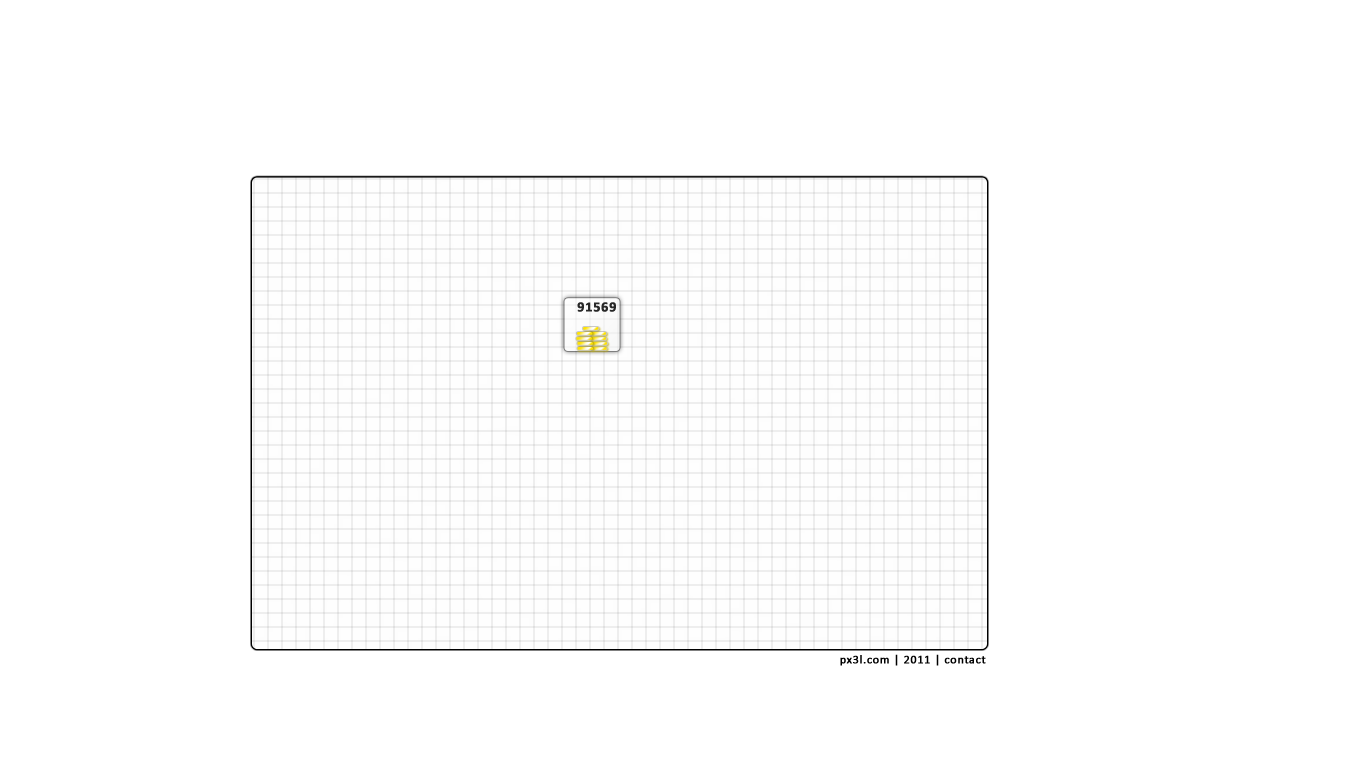
<style>
.page{position:relative;width:1366px;height:768px;background:#ffffff}
.page>*{position:absolute;margin:0}
.t1{font:14px "Calibri-Bold";letter-spacing:0.04em;color:#282828;font-weight:bold}
.t2{font:12px "Calibri";letter-spacing:0.04em;color:#000000;font-weight:bold}
</style>
<div class="page">
<p class="t1" style="left:577px;top:302px;width:39px;height:10px">91569</p>
<p class="t2" style="left:840px;top:654px;width:146px;height:12px">px3l.com | 2011 | contact</p>
</div>
